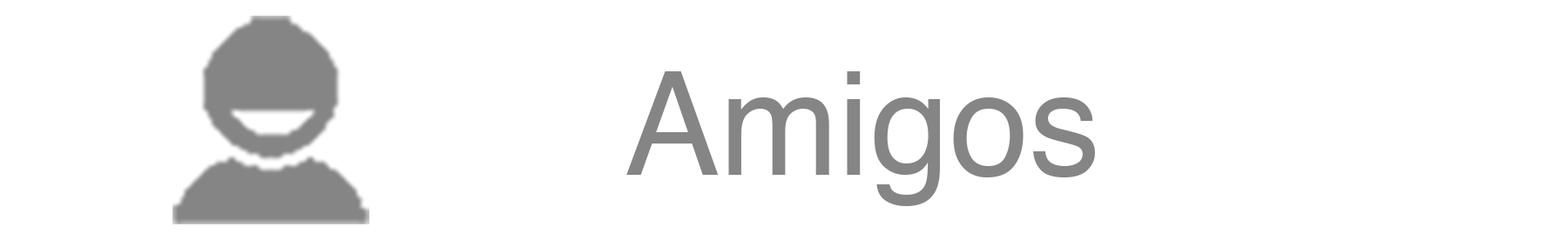
<style>
.page{position:relative;width:1568px;height:240px;background:#ffffff}
.page>*{position:absolute;margin:0}
.t1{font:144.1px "Helvetica";color:#858585}
</style>
<div class="page">
<p class="t1" style="left:626px;top:71px;width:469px;height:135px">Amigos</p>
</div>
